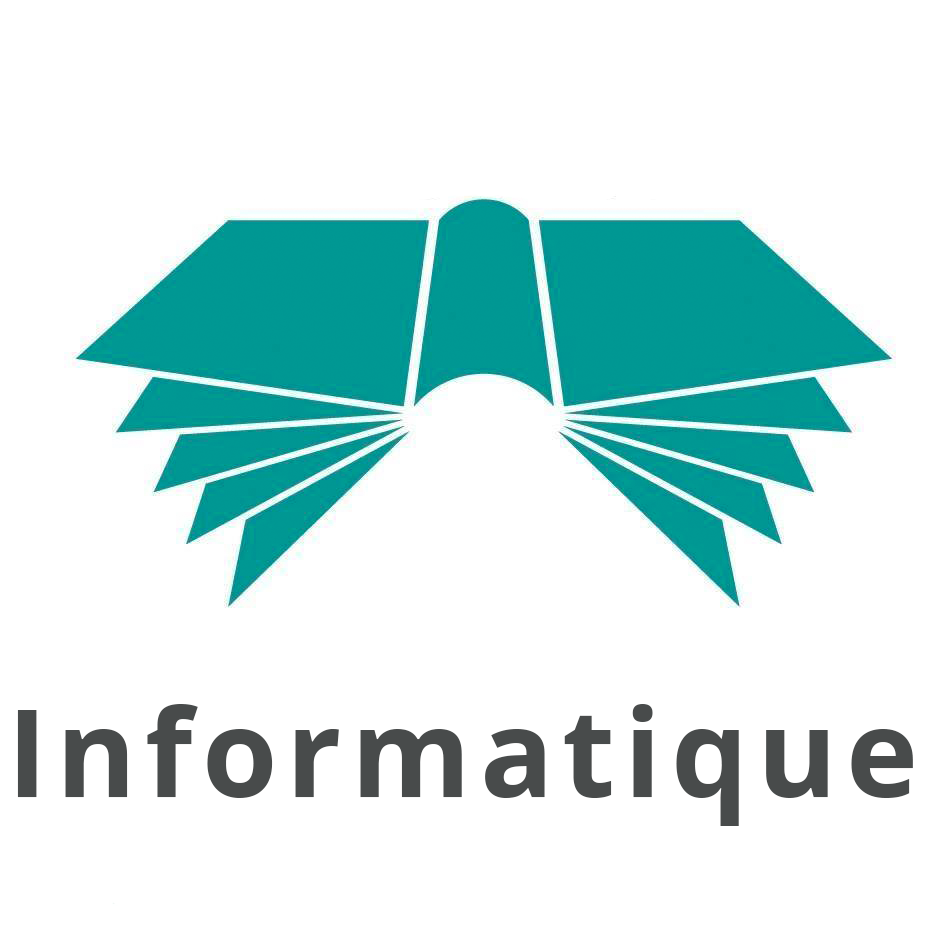
<style>
.page{position:relative;width:934px;height:934px;background:#ffffff}
.page>*{position:absolute;margin:0}
.t1{font:121.9px "OpenSans-Bold";letter-spacing:0.075em;color:#484b4b}
</style>
<div class="page">
<p class="t1" style="left:17px;top:704px;width:896px;height:122px">Informatique</p>
</div>
